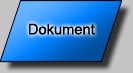
<style>
.page{position:relative;width:133px;height:73px}
.page>*{position:absolute;margin:0}
.t1{font:14.7px "ArialMT";color:#000000}
</style>
<div class="page">
<p class="t1" style="left:29px;top:23px;width:66px;height:12px">Dokument</p>
</div>
